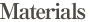
<style>
.page{position:relative;width:90px;height:22px;background:#ffffff}
.page>*{position:absolute;margin:0}
.t1{font:22px "RyuminPro-ExBold";letter-spacing:-0.08em;color:#4c4843}
</style>
<div class="page">
<p class="t1" style="left:0px;top:2px;width:86px;height:18px">Materials</p>
</div>
